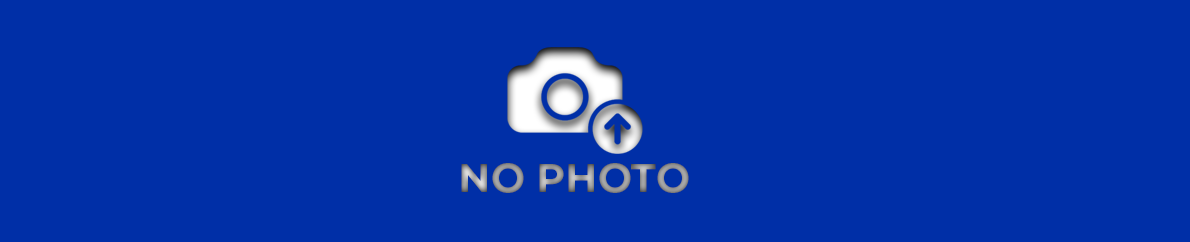
<style>
.page{position:relative;width:1190px;height:242px;background:#002fa7}
.page>*{position:absolute;margin:0}
.t1{font:69px "Montserrat-Bold";color:#999999}
</style>
<div class="page">
<p class="t1" style="left:461px;top:163px;width:228px;height:30px">NO PHOTO</p>
</div>
